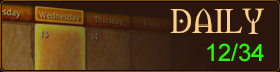
<style>
.page{position:relative;width:280px;height:72px;background:#2a160e}
.page>*{position:absolute;margin:0}
.t1{font:32px "Morpheus";color:#fed082}
.t2{font:24px "ArialMT";color:#1eff00}
</style>
<div class="page">
<p class="t1" style="left:170px;top:8px;width:94px;height:26px">DAILY</p>
<p class="t2" style="left:207px;top:43px;width:57px;height:19px">12/34</p>
</div>
